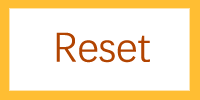
<style>
.page{position:relative;width:200px;height:100px;background:#ffffff}
.page>*{position:absolute;margin:0}
.t1{font:72px "DengXian-Regular";color:#b24401}
</style>
<div class="page">
<p class="t1" style="left:56px;top:32px;width:94px;height:31px">Reset</p>
</div>
